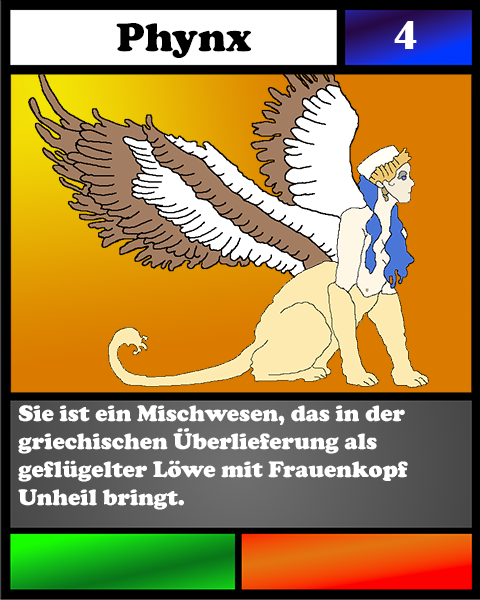
<style>
.page{position:relative;width:480px;height:600px}
.page>*{position:absolute;margin:0}
.t1{font:41.7px "CooperBlack";color:#000000}
.t2{font:41.7px "BritannicBold";color:#ffffff}
.t3{font:23.1px "CooperBlack";color:#ffffff}
</style>
<div class="page">
<p class="t1" style="left:116px;top:23px;width:135px;height:35px">Phynx</p>
<p class="t2" style="left:394px;top:21px;width:23px;height:28px">4</p>
<p class="t3" style="left:18px;top:405px;width:390px;height:105px">Sie ist ein Mischwesen, das in der griechischen Überlieferung als geflügelter Löwe mit Frauenkopf Unheil bringt.</p>
</div>
